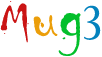
<style>
.page{position:relative;width:102px;height:57px;background:#ffffff}
.page>*{position:absolute;margin:0}
.t1{font:53.3px "Chiller-Regular";color:#ca1414}
.t2{font:80px "Chiller-Regular";color:#eb9e0a}
.t3{font:80px "Chiller-Regular";color:#03bf2b}
.t4{font:56px "NuevaStd-Cond";color:#0482bd}
</style>
<div class="page">
<p class="t1" style="left:0px;top:1px;width:101px;height:55px">M<span class="t2">u</span><span class="t3">g</span><span class="t4">3</span></p>
</div>
